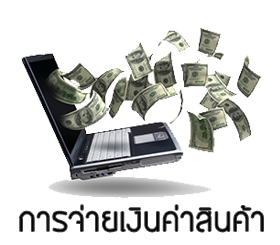
<style>
.page{position:relative;width:280px;height:245px;background:#ffffff}
.page>*{position:absolute;margin:0}
.t1{font:30px "BangnaNew";color:#020200}
</style>
<div class="page">
<p class="t1" style="left:20px;top:205px;width:243px;height:27px">การจ่ายเงินค่าสินค้า</p>
</div>
